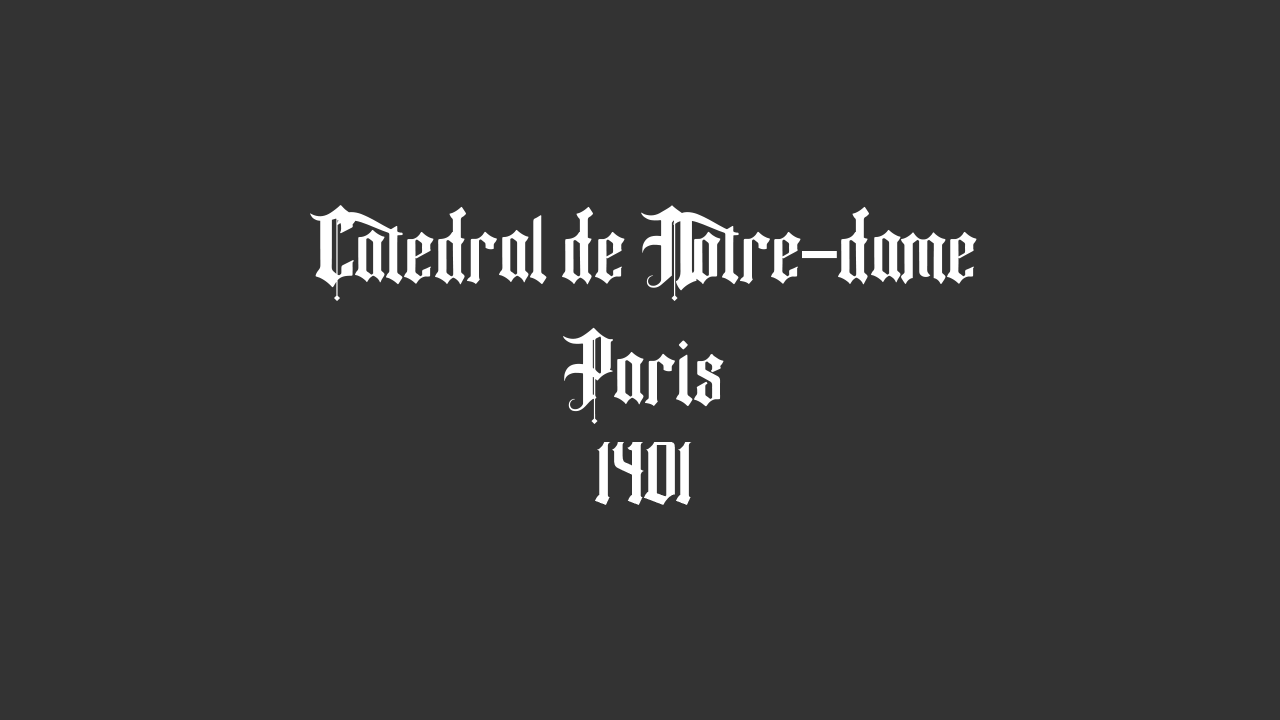
<style>
.page{position:relative;width:1280px;height:720px;background:#333333}
.page>*{position:absolute;margin:0}
.t1{font:101.6px "FancyQuisley-Regular";color:#ffffff}
.t2{font:83.8px "FancyQuisley-Regular";color:#ffffff}
</style>
<div class="page">
<p class="t1" style="left:310px;top:205px;width:667px;height:300px;text-align:center">Catedral de Notre-dame<br>Paris<br><span class="t2">1401</span></p>
</div>
